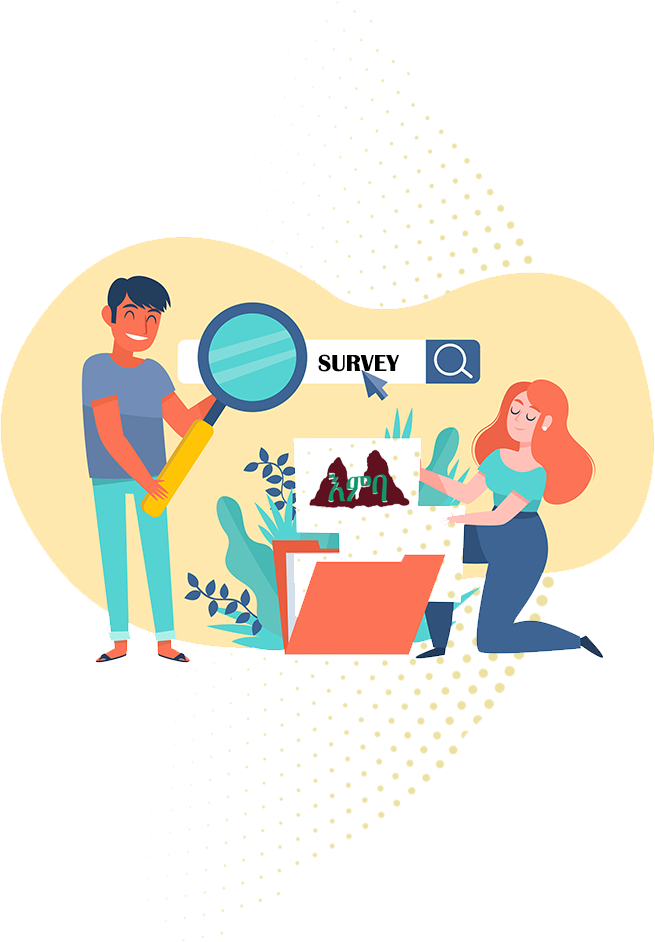
<style>
.page{position:relative;width:655px;height:942px;background:#ffffff}
.page>*{position:absolute;margin:0}
.t1{font:24px "BritannicBold";color:#000000;text-transform:uppercase}
</style>
<div class="page">
<p class="t1" style="left:318px;top:354px;width:81px;height:18px">survey</p>
</div>
